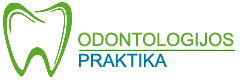
<style>
.page{position:relative;width:240px;height:80px;background:#ffffff}
.page>*{position:absolute;margin:0}
.t1{font:18px "ArialMT";color:#5ba828}
.t2{font:18px "ArialMT";color:#0077a3}
</style>
<div class="page">
<p class="t1" style="left:78px;top:32px;width:156px;height:15px">ODONTOLOGIJOS</p>
<p class="t2" style="left:79px;top:53px;width:88px;height:14px">PRAKTIKA</p>
</div>
